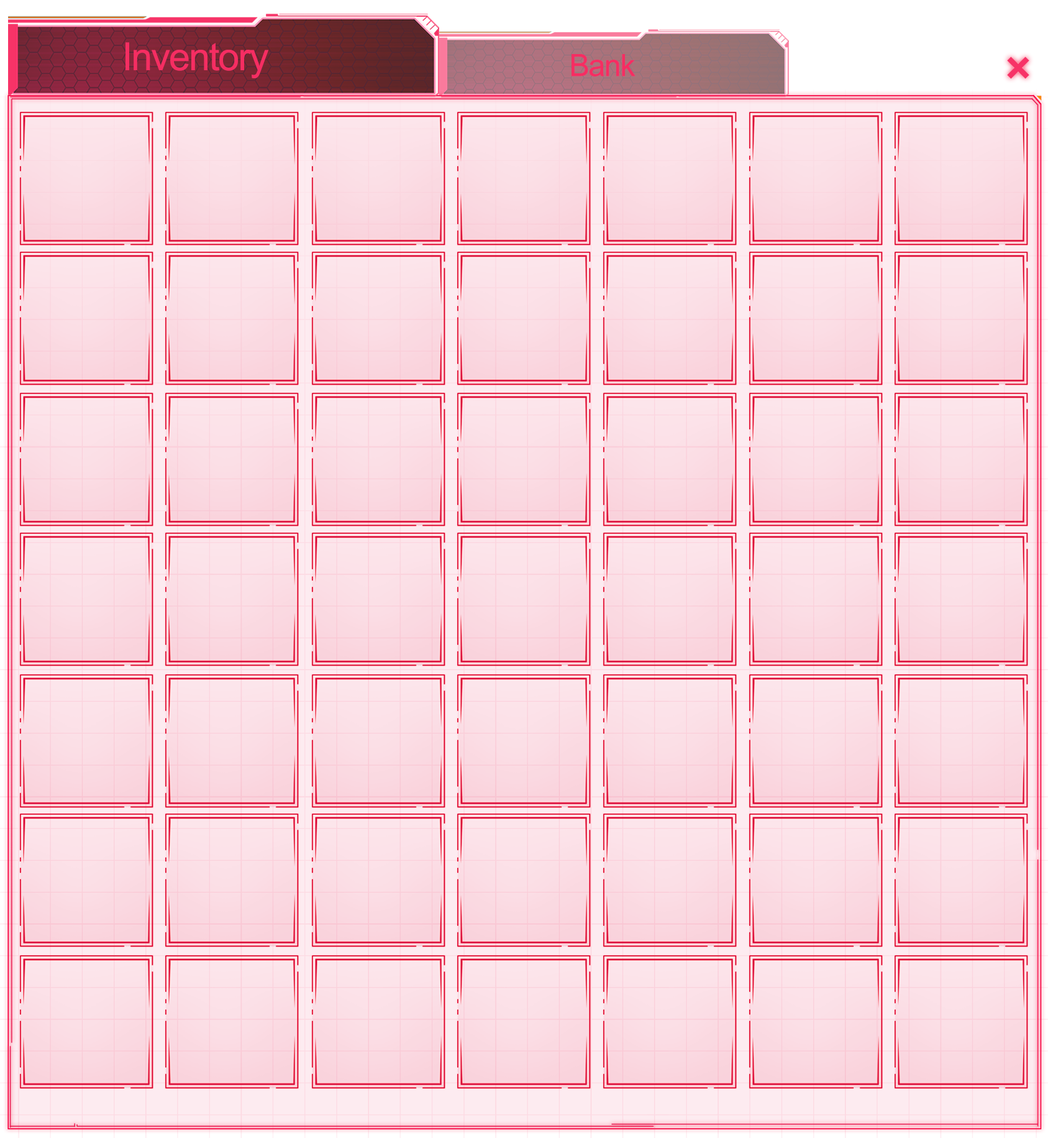
<style>
.page{position:relative;width:1048px;height:1138px}
.page>*{position:absolute;margin:0}
.t1{font:38.5px "ArialNarrow";letter-spacing:-0.025em;color:#f62d62;scale:1.2 1}
.t2{font:30.6px "ArialNarrow";letter-spacing:-0.025em;color:#f62d62;scale:1.2 1}
</style>
<div class="page">
<p class="t1" style="left:126px;top:42px;width:142px;height:36px">Inventory</p>
<p class="t2" style="left:572px;top:54px;width:64px;height:22px">Bank</p>
</div>
